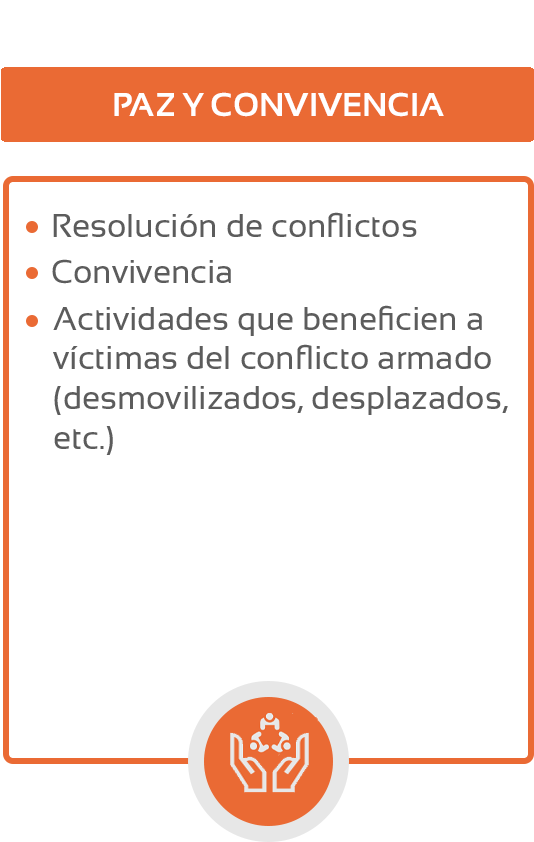
<style>
.page{position:relative;width:534px;height:842px;background:#ffffff}
.page>*{position:absolute;margin:0}
.t1{font:33px "Sansation-Bold";color:#ffffff}
.t2{font:33px "Sansation-Regular";color:#5c5c5c}
</style>
<div class="page">
<p class="t1" style="left:114px;top:92px;width:330px;height:25px">PAZ Y CONVIVENCIA</p>
<p class="t2" style="left:53px;top:212px;width:364px;height:25px">Resolución de conflictos</p>
<p class="t2" style="left:52px;top:259px;width:179px;height:25px">Convivencia</p>
<p class="t2" style="left:53px;top:305px;width:455px;height:150px">Actividades que beneficien a <br>víctimas del conflicto armado <br>(desmovilizados, desplazados, <br>etc.)</p>
</div>
